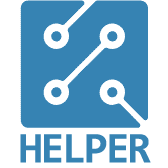
<style>
.page{position:relative;width:168px;height:168px;background:#3683b3}
.page>*{position:absolute;margin:0}
.t1{font:44px "Consolas-Bold";letter-spacing:-0.055em;color:#3683b3;text-transform:uppercase}
</style>
<div class="page">
<p class="t1" style="left:20px;top:134px;width:131px;height:29px">HELPER</p>
</div>
